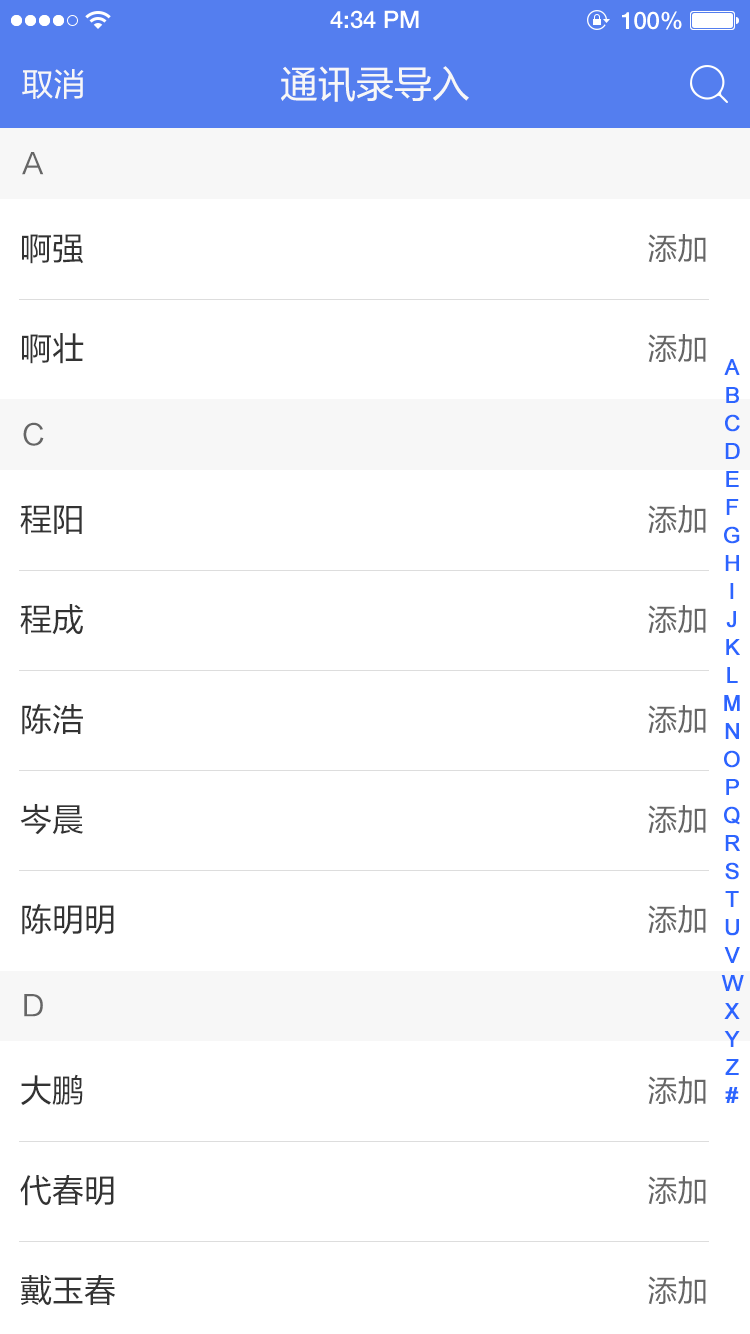
<style>
.page{position:relative;width:750px;height:1334px;background:#ffffff}
.page>*{position:absolute;margin:0}
.t1{font:24px "HelveticaNeueLTPro-Md";color:#ffffff}
.t2{font:32px "FZLTHJW-GB1-0";color:#f7f7f7}
.t3{font:38px "FZLTHJW-GB1-0";color:#f7f7f7}
.t4{font:28px "FZLTHJW-GB1-0";color:#666666}
.t5{font:32px "FZLTHJW-GB1-0";color:#333333}
.t6{font:30px "FZLTHJW-GB1-0";color:#666666}
.t7{font:22px/28px "ArialMT";color:#2c65ff;font-weight:bold}
</style>
<div class="page">
<p class="t1" style="left:330px;top:10px;width:89px;height:19px">4:34 PM</p>
<p class="t1" style="left:622px;top:11px;width:60px;height:19px">100%</p>
<p class="t2" style="left:22px;top:69px;width:62px;height:30px">取消</p>
<p class="t3" style="left:281px;top:66px;width:188px;height:36px">通讯录导入</p>
<p class="t4" style="left:22px;top:152px;width:22px;height:23px">A</p>
<p class="t5" style="left:22px;top:234px;width:62px;height:30px">啊强</p>
<p class="t6" style="left:648px;top:234px;width:58px;height:29px">添加</p>
<p class="t5" style="left:22px;top:333px;width:62px;height:31px">啊壮</p>
<p class="t6" style="left:648px;top:334px;width:58px;height:29px">添加</p>
<p class="t7" style="left:721px;top:359px;width:23px;height:744px;text-align:center">A<br>B<br>C<br>D<br>E<br>F<br>G<br>H<br>I<br>J<br>K<br>L<br>M<br>N<br>O<br>P<br>Q<br>R<br>S<br>T<br>U<br>V<br>W<br>X<br>Y<br>Z<br>#</p>
<p class="t4" style="left:23px;top:422px;width:21px;height:24px">C</p>
<p class="t5" style="left:20px;top:505px;width:62px;height:29px">程阳</p>
<p class="t6" style="left:648px;top:505px;width:58px;height:29px">添加</p>
<p class="t5" style="left:20px;top:604px;width:63px;height:31px">程成</p>
<p class="t6" style="left:648px;top:605px;width:58px;height:29px">添加</p>
<p class="t5" style="left:22px;top:704px;width:61px;height:31px">陈浩</p>
<p class="t6" style="left:648px;top:705px;width:58px;height:29px">添加</p>
<p class="t5" style="left:20px;top:804px;width:63px;height:31px">岑晨</p>
<p class="t6" style="left:648px;top:805px;width:58px;height:29px">添加</p>
<p class="t5" style="left:22px;top:904px;width:92px;height:31px">陈明明</p>
<p class="t6" style="left:648px;top:905px;width:58px;height:29px">添加</p>
<p class="t4" style="left:24px;top:994px;width:19px;height:23px">D</p>
<p class="t5" style="left:21px;top:1074px;width:62px;height:32px">大鹏</p>
<p class="t6" style="left:648px;top:1076px;width:58px;height:29px">添加</p>
<p class="t5" style="left:20px;top:1175px;width:94px;height:31px">代春明</p>
<p class="t6" style="left:648px;top:1176px;width:58px;height:29px">添加</p>
<p class="t5" style="left:21px;top:1275px;width:94px;height:30px">戴玉春</p>
<p class="t6" style="left:648px;top:1276px;width:58px;height:29px">添加</p>
</div>
